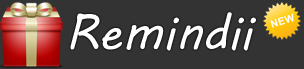
<style>
.page{position:relative;width:304px;height:69px;background:#333333}
.page>*{position:absolute;margin:0}
.t1{font:48px "MVBoli";color:#ffffff}
</style>
<div class="page">
<p class="t1" style="left:70px;top:12px;width:186px;height:39px">Remindii</p>
</div>
